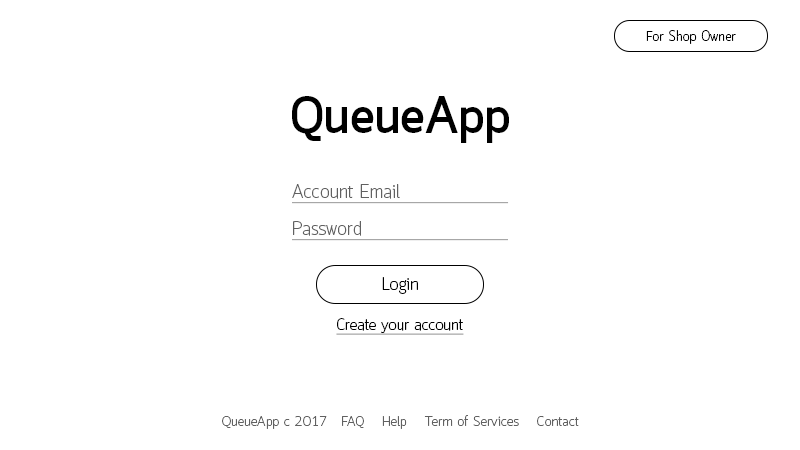
<style>
.page{position:relative;width:800px;height:450px;background:#ffffff}
.page>*{position:absolute;margin:0}
.t1{font:14.4px "Quark-Light";letter-spacing:0.011em;color:#000000}
.t2{font:52.2px "Quark-Bold";letter-spacing:0.005em;color:#000000}
.t3{font:19px "Quark-Light";letter-spacing:0.01em;color:#616161;text-decoration:underline}
.t4{font:17.7px "Quark-Light";letter-spacing:0.011em;color:#000000}
.t5{font:16px "Quark-Light";letter-spacing:0.009em;color:#000000;text-decoration:underline}
.t6{font:14px "Quark-Light";letter-spacing:0.01em;color:#616161}
</style>
<div class="page">
<p class="t1" style="left:646px;top:30px;width:90px;height:14px">For Shop Owner</p>
<p class="t2" style="left:292px;top:96px;width:217px;height:47px">QueueApp</p>
<p class="t3" style="left:292px;top:184px;width:217px;height:20px">Account Email</p>
<p class="t3" style="left:292px;top:221px;width:216px;height:20px">Password</p>
<p class="t4" style="left:382px;top:277px;width:36px;height:17px">Login</p>
<p class="t5" style="left:336px;top:318px;width:128px;height:17px">Create your account</p>
<p class="t6" style="left:222px;top:415px;width:357px;height:14px">QueueApp c 2017   FAQ    Help    Term of Services    Contact</p>
</div>
